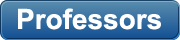
<style>
.page{position:relative;width:180px;height:40px}
.page>*{position:absolute;margin:0}
.t1{font:48px "Arial-BoldMT";color:#ffffff}
</style>
<div class="page">
<p class="t1" style="left:18px;top:8px;width:143px;height:22px">Professors</p>
</div>
